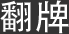
<style>
.page{position:relative;width:69px;height:34px;background:#333333}
.page>*{position:absolute;margin:0}
.t1{font:35.4px "AdobeHeitiStd-Regular";color:#ffffff}
</style>
<div class="page">
<p class="t1" style="left:0px;top:0px;width:69px;height:34px">翻牌</p>
</div>
